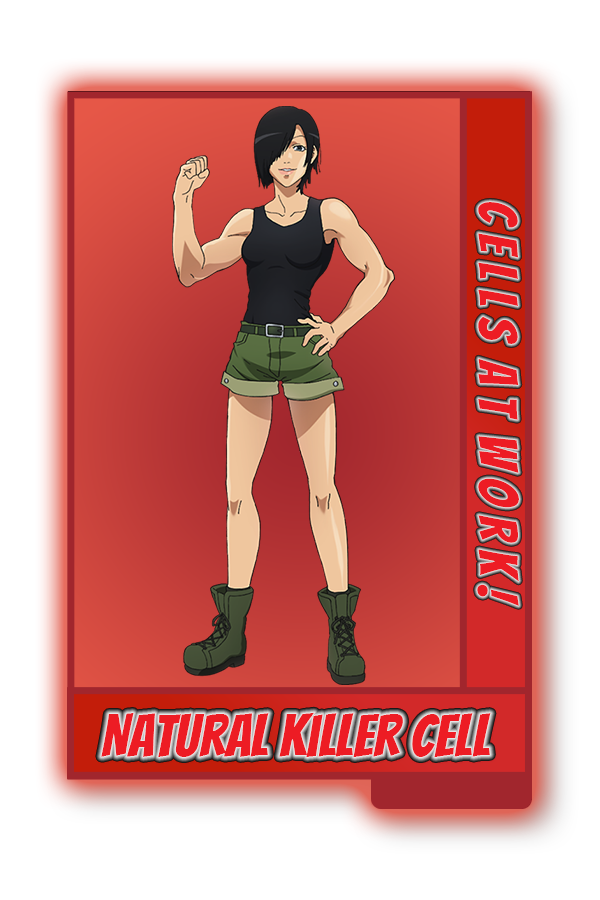
<style>
.page{position:relative;width:600px;height:900px;background:#ffffff}
.page>*{position:absolute;margin:0}
.t1{font:54px "Bangers-Regular";color:#ed1c24}
.t2{font:58.3px "Bangers-Regular";color:#ed1c24}
</style>
<div class="page">
<p class="t1" style="left:477px;top:202px;width:42px;height:404px;rotate:90deg">C e l l S  A t  W o r k !</p>
<p class="t2" style="left:101px;top:712px;width:390px;height:45px">Natural killer cell</p>
</div>
